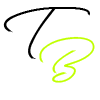
<style>
.page{position:relative;width:100px;height:100px;background:#ffffff}
.page>*{position:absolute;margin:0}
.t1{font:41.7px "GreatDayPersonalUse";color:#000000}
.t2{font:33.3px "GreatDayPersonalUse";color:#c0ff00}
</style>
<div class="page">
<p class="t1" style="left:3px;top:7px;width:87px;height:52px">T</p>
<p class="t2" style="left:39px;top:36px;width:56px;height:47px">B</p>
</div>
